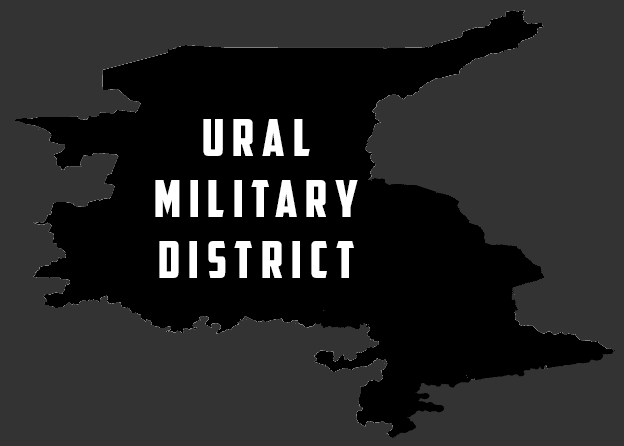
<style>
.page{position:relative;width:624px;height:446px;background:#333333}
.page>*{position:absolute;margin:0}
.t1{font:51px "AmericanCaptain";letter-spacing:0.16em;color:#ffffff}
</style>
<div class="page">
<p class="t1" style="left:155px;top:119px;width:203px;height:159px;text-align:center">Ural<br>Military<br>district</p>
</div>
